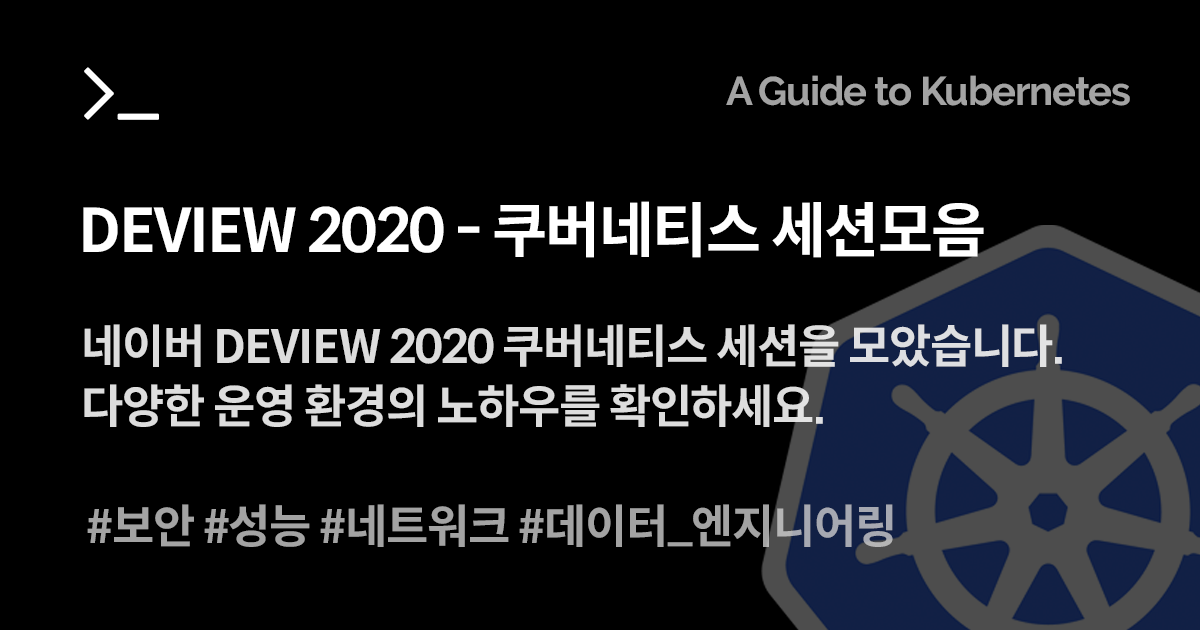
<style>
.page{position:relative;width:1200px;height:630px;background:#000000}
.page>*{position:absolute;margin:0}
.t1{font:40px "Raleway-Bold";letter-spacing:-0.03em;color:#a3a3a3}
.t2{font:60px "SpoqaHanSansNeo-Bold";letter-spacing:-0.03em;color:#ffffff}
.t3{font:46px/60px "SpoqaHanSansNeo-Bold";letter-spacing:-0.03em;color:#dddddd}
.t4{font:46px "SpoqaHanSansNeo-Bold";letter-spacing:-0.03em;color:#a3a3a3}
</style>
<div class="page">
<p class="t1" style="left:726px;top:75px;width:404px;height:31px">A Guide to Kubernetes</p>
<p class="t2" style="left:83px;top:201px;width:901px;height:57px">DEVIEW 2020 - 쿠버네티스 세션모음</p>
<p class="t3" style="left:84px;top:324px;width:978px;height:103px">네이버 DEVIEW 2020 쿠버네티스 세션을 모았습니다.<br>다양한 운영 환경의 노하우를 확인하세요.</p>
<p class="t4" style="left:87px;top:504px;width:806px;height:43px">#보안 #성능 #네트워크 #데이터_엔지니어링</p>
</div>
